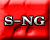
<style>
.page{position:relative;width:50px;height:40px}
.page>*{position:absolute;margin:0}
.t1{font:11.2px "MyungjoXB-HM";scale:1.53 1}
</style>
<div class="page">
<p class="t1" style="left:4px;top:16px;width:41px;height:9px">S-NG</p>
</div>
